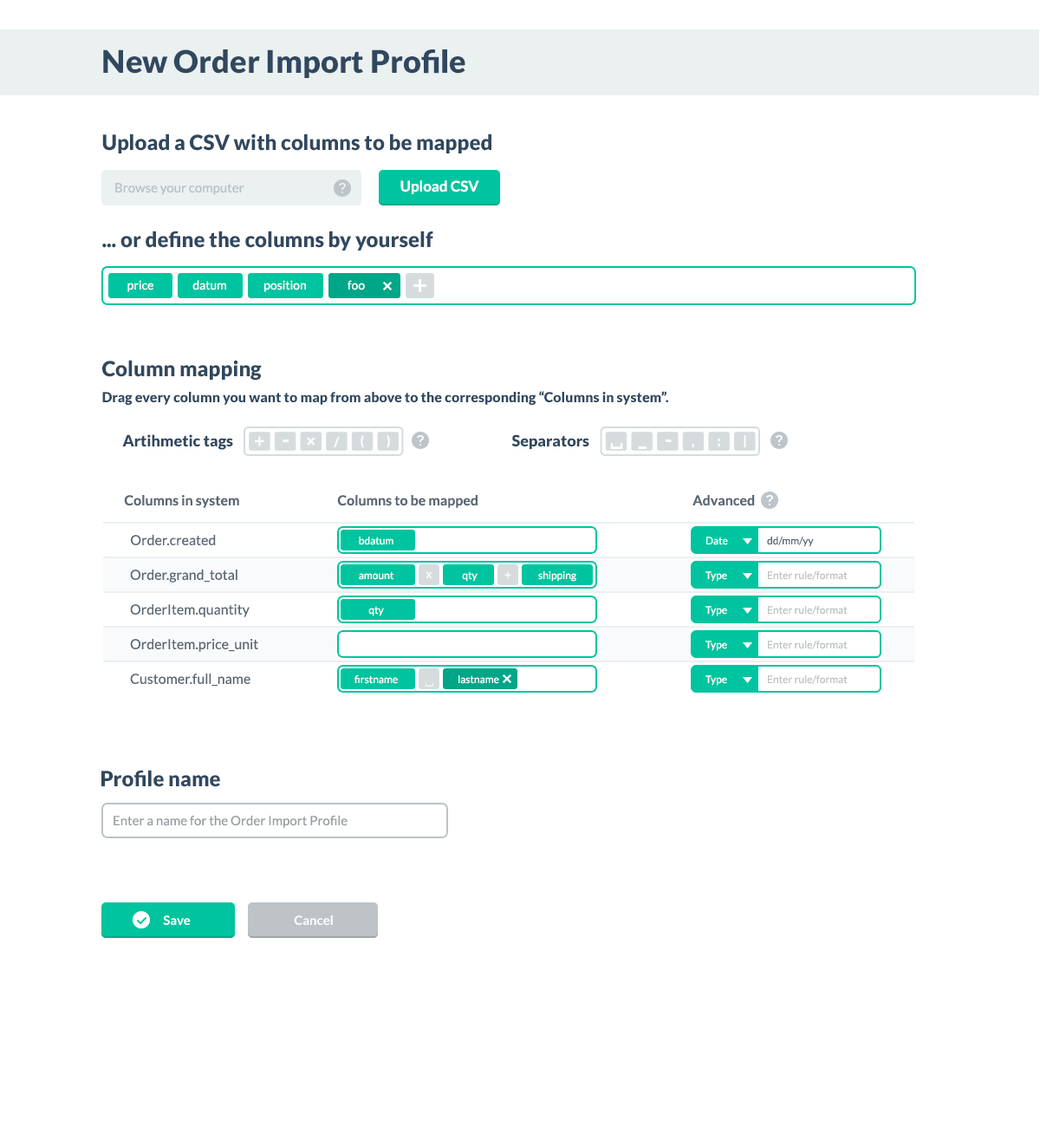
<style>
.page{position:relative;width:1040px;height:1146px;background:#ffffff}
.page>*{position:absolute;margin:0}
.t1{font:31.2px "Lato-Black";color:#30485f}
.t2{font:20.8px "Lato-Black";color:#30485f}
.t3{font:13px "Lato-Regular";color:#b8c0c6}
.t4{font:14.7px "Lato-Bold";color:#ffffff}
.t5{font:12.1px "Lato-Regular";color:#ffffff}
.t6{font:13.9px "Lato-Black";color:#30485f}
.t7{font:15.6px "Lato-Black";color:#30485f}
.t8{font:12.9px "Lato-Black";color:#ffffff}
.t9{font:20.6px "Lato-Black";color:#ffffff}
.t10{font:13.9px "Lato-Bold";color:#5a6774}
.t11{font:13.9px/34.7px "Lato-Regular";color:#5a6774}
.t12{font:10.4px "Lato-Regular";color:#ffffff}
.t13{font:10.4px "Lato-Regular";color:#5a6774}
.t14{font:10.4px "Lato-Regular";color:#bdc1c5}
.t15{font:13px "Lato-Regular";color:#969da4}
.t16{font:13px "Lato-Bold";color:#ffffff}
</style>
<div class="page">
<p class="t1" style="left:103px;top:49px;width:363px;height:29px">New Order Import Profile</p>
<p class="t2" style="left:102px;top:134px;width:390px;height:19px">Upload a CSV with columns to be mapped</p>
<p class="t3" style="left:115px;top:183px;width:129px;height:12px">Browse your computer</p>
<p class="t4" style="left:401px;top:180px;width:78px;height:14px">Upload CSV</p>
<p class="t2" style="left:102px;top:231px;width:331px;height:20px">... or define the columns by yourself</p>
<p class="t5" style="left:127px;top:280px;width:26px;height:12px">price</p>
<p class="t5" style="left:192px;top:280px;width:34px;height:10px">datum</p>
<p class="t5" style="left:264px;top:280px;width:42px;height:12px">position</p>
<p class="t5" style="left:348px;top:280px;width:17px;height:10px">foo</p>
<p class="t2" style="left:102px;top:360px;width:160px;height:21px">Column mapping</p>
<p class="t6" style="left:102px;top:391px;width:566px;height:14px">Drag every column you want to map from above to the corresponding “Columns in system”.</p>
<p class="t7" style="left:122px;top:434px;width:111px;height:16px">Artihmetic tags</p>
<p class="t8" style="left:334px;top:437px;width:6px;height:10px">/</p>
<p class="t8" style="left:361px;top:435px;width:3px;height:13px">(</p>
<p class="t8" style="left:387px;top:435px;width:3px;height:13px">)</p>
<p class="t7" style="left:512px;top:434px;width:78px;height:15px">Separators</p>
<p class="t8" style="left:744px;top:435px;width:2px;height:12px">|</p>
<p class="t9" style="left:283px;top:440px;width:6px;height:2px">-</p>
<p class="t9" style="left:638px;top:446px;width:10px;height:3px">_</p>
<p class="t9" style="left:666px;top:440px;width:6px;height:2px">-</p>
<p class="t8" style="left:692px;top:444px;width:3px;height:4px">,</p>
<p class="t8" style="left:718px;top:439px;width:2px;height:8px">;</p>
<p class="t10" style="left:124px;top:495px;width:115px;height:13px">Columns in system</p>
<p class="t10" style="left:337px;top:495px;width:141px;height:13px">Columns to be mapped</p>
<p class="t10" style="left:693px;top:495px;width:62px;height:11px">Advanced</p>
<p class="t11" style="left:130px;top:535px;width:128px;height:152px">Order.created<br>Order.grand_total <br>OrderItem.quantity<br>OrderItem.price_unit<br>Customer.full_name</p>
<p class="t12" style="left:359px;top:537px;width:35px;height:8px">bdatum</p>
<p class="t12" style="left:707px;top:537px;width:21px;height:8px">Date</p>
<p class="t13" style="left:767px;top:537px;width:47px;height:10px">dd/mm/yy</p>
<p class="t12" style="left:359px;top:571px;width:35px;height:9px">amount</p>
<p class="t5" style="left:426px;top:571px;width:7px;height:7px">x</p>
<p class="t12" style="left:462px;top:571px;width:16px;height:11px">qty</p>
<p class="t5" style="left:505px;top:571px;width:7px;height:7px">+</p>
<p class="t12" style="left:538px;top:571px;width:39px;height:11px">shipping</p>
<p class="t12" style="left:706px;top:571px;width:21px;height:11px">Type</p>
<p class="t14" style="left:768px;top:571px;width:80px;height:9px">Enter rule/format</p>
<p class="t12" style="left:368px;top:606px;width:16px;height:10px">qty</p>
<p class="t12" style="left:706px;top:606px;width:21px;height:10px">Type</p>
<p class="t14" style="left:768px;top:606px;width:80px;height:9px">Enter rule/format</p>
<p class="t12" style="left:706px;top:641px;width:21px;height:10px">Type</p>
<p class="t14" style="left:768px;top:641px;width:80px;height:8px">Enter rule/format</p>
<p class="t12" style="left:355px;top:675px;width:43px;height:9px">firstname</p>
<p class="t12" style="left:459px;top:675px;width:40px;height:9px">lastname</p>
<p class="t12" style="left:706px;top:675px;width:21px;height:11px">Type</p>
<p class="t14" style="left:768px;top:675px;width:80px;height:9px">Enter rule/format</p>
<p class="t2" style="left:101px;top:770px;width:119px;height:17px">Profile name</p>
<p class="t15" style="left:114px;top:815px;width:234px;height:13px">Enter a name for the Order Import Profile</p>
<p class="t16" style="left:163px;top:916px;width:28px;height:9px">Save</p>
<p class="t16" style="left:294px;top:916px;width:39px;height:9px">Cancel</p>
</div>
